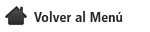
<style>
.page{position:relative;width:150px;height:32px;background:#ffffff}
.page>*{position:absolute;margin:0}
.t1{font:14px "FrutigerLT-BoldCn";letter-spacing:0.005em;color:#272727}
</style>
<div class="page">
<p class="t1" style="left:34px;top:11px;width:89px;height:11px">Volver al Menú</p>
</div>
